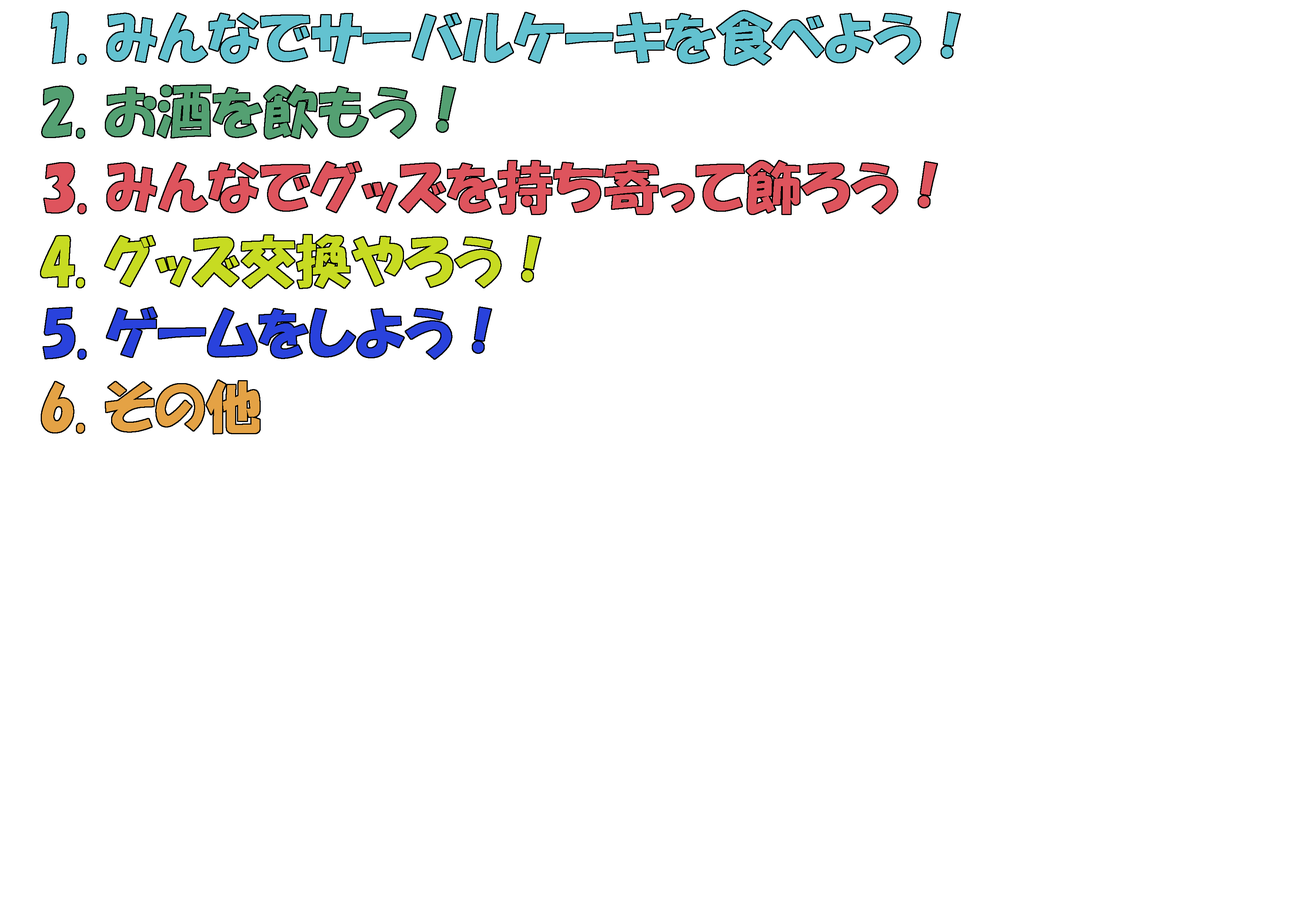
<style>
.page{position:relative;width:1299px;height:918px;background:#ffffff}
.page>*{position:absolute;margin:0}
.t1{font:55.5px "HGPSoeiKakupoptai";color:#63c2d0}
.t2{font:55.5px "HGPSoeiKakupoptai";color:#54a072}
.t3{font:55.5px "HGPSoeiKakupoptai";color:#de545d}
.t4{font:55.5px "HGPSoeiKakupoptai";color:#c7db22}
.t5{font:55.5px "HGPSoeiKakupoptai";color:#2942dc}
.t6{font:55.5px "HGPSoeiKakupoptai";color:#e4a245}
</style>
<div class="page">
<p class="t1" style="left:52px;top:11px;width:908px;height:54px">1. みんなでサーバルケーキを食べよう！</p>
<p class="t2" style="left:42px;top:86px;width:413px;height:52px">2. お酒を飲もう！</p>
<p class="t3" style="left:44px;top:161px;width:893px;height:53px">3. みんなでグッズを持ち寄って飾ろう！</p>
<p class="t4" style="left:41px;top:235px;width:499px;height:53px">4. グッズ交換やろう！</p>
<p class="t5" style="left:44px;top:308px;width:447px;height:51px">5. ゲームをしよう！</p>
<p class="t6" style="left:42px;top:381px;width:218px;height:53px">6. その他</p>
</div>
